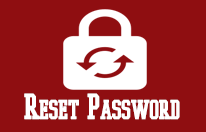
<style>
.page{position:relative;width:206px;height:132px;background:#8f0e11}
.page>*{position:absolute;margin:0}
.t1{font:26.7px "CollegeBoy";letter-spacing:-0.01em;color:#ffffff;font-weight:bold}
</style>
<div class="page">
<p class="t1" style="left:24px;top:93px;width:156px;height:27px">Reset Password</p>
</div>
